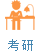
<style>
.page{position:relative;width:40px;height:55px;background:#ffffff}
.page>*{position:absolute;margin:0}
.t1{font:22.5px "SimSun";letter-spacing:0.1em;color:#4788b2;font-variant:small-caps}
</style>
<div class="page">
<p class="t1" style="left:8px;top:39px;width:25px;height:12px">考研</p>
</div>
